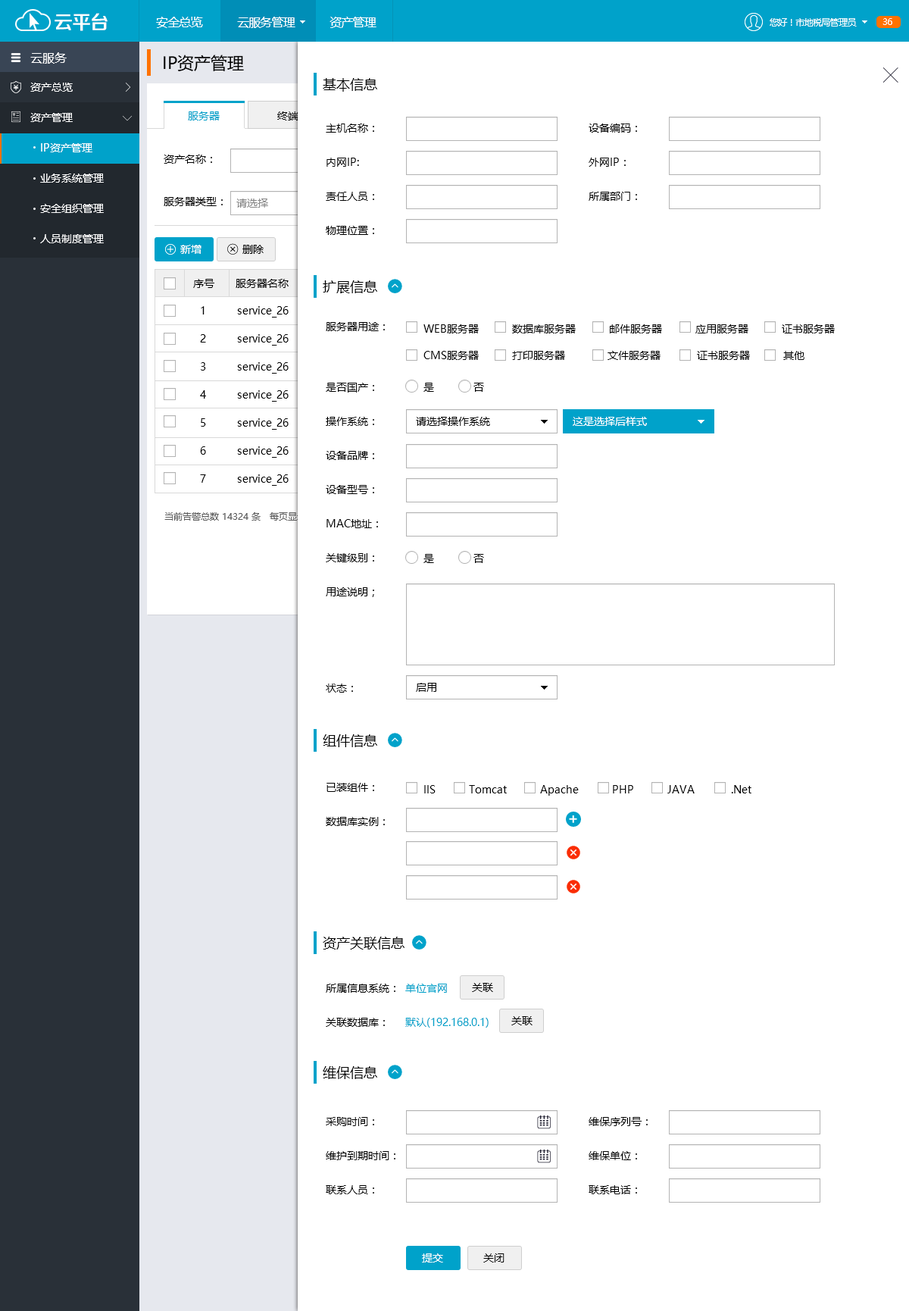
<style>
.page{position:relative;width:909px;height:1311px;background:#ffffff}
.page>*{position:absolute;margin:0}
.t1{font:19.2px "FZZZHONGJW--GB1-0";letter-spacing:-0.05em;color:#ffffff}
.t2{font:12.1px "MicrosoftYaHei";letter-spacing:-0.05em;color:#ffffff}
.t3{font:9.1px "MicrosoftYaHei";letter-spacing:-0.05em;color:#ffffff}
.t4{font:12.1px "MicrosoftYaHei";color:#ffffff}
.t5{font:16.7px "MicrosoftYaHei";color:#000000}
.t6{font:10.6px "MicrosoftYaHei";color:#ffffff}
.t7{font:13.6px "MicrosoftYaHei";color:#000000}
.t8{font:10.6px/34.1px "MicrosoftYaHei";color:#000000}
.t9{font:10.6px/30.3px "MicrosoftYaHei";color:#ffffff}
.t10{font:10.6px "MicrosoftYaHei";color:#000000}
.t11{font:10.6px/26.5px "MicrosoftYaHei";color:#000000}
.t12{font:10.6px/34.1px "MicrosoftYaHei";color:#00a2ca}
</style>
<div class="page">
<p class="t1" style="left:55px;top:13px;width:53px;height:18px">云平台</p>
<p class="t2" style="left:156px;top:17px;width:221px;height:11px">安全总览           云服务管理           资产管理</p>
<p class="t3" style="left:770px;top:18px;width:87px;height:9px">您好！市地税局管理员</p>
<p class="t3" style="left:883px;top:18px;width:10px;height:7px">36</p>
<p class="t4" style="left:30px;top:52px;width:37px;height:12px">云服务</p>
<p class="t5" style="left:164px;top:55px;width:80px;height:16px">IP资产管理</p>
<p class="t6" style="left:30px;top:83px;width:43px;height:9px">资产总览</p>
<p class="t7" style="left:323px;top:78px;width:54px;height:14px">基本信息</p>
<p class="t6" style="left:30px;top:113px;width:43px;height:9px">资产管理</p>
<p class="t8" style="left:326px;top:124px;width:48px;height:111px">主机名称：<br>内网IP:<br>责任人员：<br>物理位置：</p>
<p class="t8" style="left:589px;top:124px;width:48px;height:77px">设备编码：<br>外网IP：<br>所属部门：</p>
<p class="t9" style="left:40px;top:143px;width:64px;height:100px">IP资产管理<br>业务系统管理<br>安全组织管理<br>人员制度管理</p>
<p class="t7" style="left:323px;top:280px;width:54px;height:13px">扩展信息</p>
<p class="t10" style="left:326px;top:322px;width:59px;height:9px">服务器用途：</p>
<p class="t11" style="left:424px;top:324px;width:411px;height:36px">WEB服务器           数据库服务器           邮件服务器           应用服务器           证书服务器<br>CMS服务器           打印服务器              文件服务器            证书服务器           其他</p>
<p class="t8" style="left:326px;top:383px;width:52px;height:214px">是否国产：<br>操作系统：<br>设备品牌：<br>设备型号：<br>MAC地址：<br>关键级别：<br>用途说明；</p>
<p class="t10" style="left:424px;top:383px;width:60px;height:9px">是             否</p>
<p class="t10" style="left:416px;top:417px;width:74px;height:9px">请选择操作系统</p>
<p class="t6" style="left:573px;top:417px;width:74px;height:9px">这是选择后样式</p>
<p class="t10" style="left:424px;top:554px;width:60px;height:9px">是             否</p>
<p class="t10" style="left:326px;top:684px;width:27px;height:9px">状态：</p>
<p class="t10" style="left:416px;top:683px;width:21px;height:9px">启用</p>
<p class="t7" style="left:323px;top:734px;width:54px;height:13px">组件信息</p>
<p class="t8" style="left:326px;top:783px;width:59px;height:43px">已装组件：<br>数据库实例：</p>
<p class="t10" style="left:424px;top:785px;width:328px;height:11px">IIS           Tomcat           Apache           PHP           JAVA            .Net</p>
<p class="t7" style="left:323px;top:937px;width:82px;height:13px">资产关联信息</p>
<p class="t8" style="left:326px;top:984px;width:70px;height:43px">所属信息系统：<br>关联数据库：</p>
<p class="t12" style="left:405px;top:984px;width:84px;height:44px">单位官网<br>默认(192.168.0.1)</p>
<p class="t10" style="left:472px;top:983px;width:21px;height:9px">关联</p>
<p class="t10" style="left:512px;top:1016px;width:21px;height:9px">关联</p>
<p class="t7" style="left:323px;top:1066px;width:54px;height:13px">维保信息</p>
<p class="t8" style="left:326px;top:1117px;width:70px;height:77px">采购时间：<br>维护到期时间：<br>联系人员：</p>
<p class="t8" style="left:589px;top:1117px;width:59px;height:77px">维保序列号：<br>维保单位：<br>联系电话：</p>
<p class="t6" style="left:422px;top:1254px;width:21px;height:9px">提交</p>
<p class="t10" style="left:484px;top:1254px;width:21px;height:9px">关闭</p>
</div>
